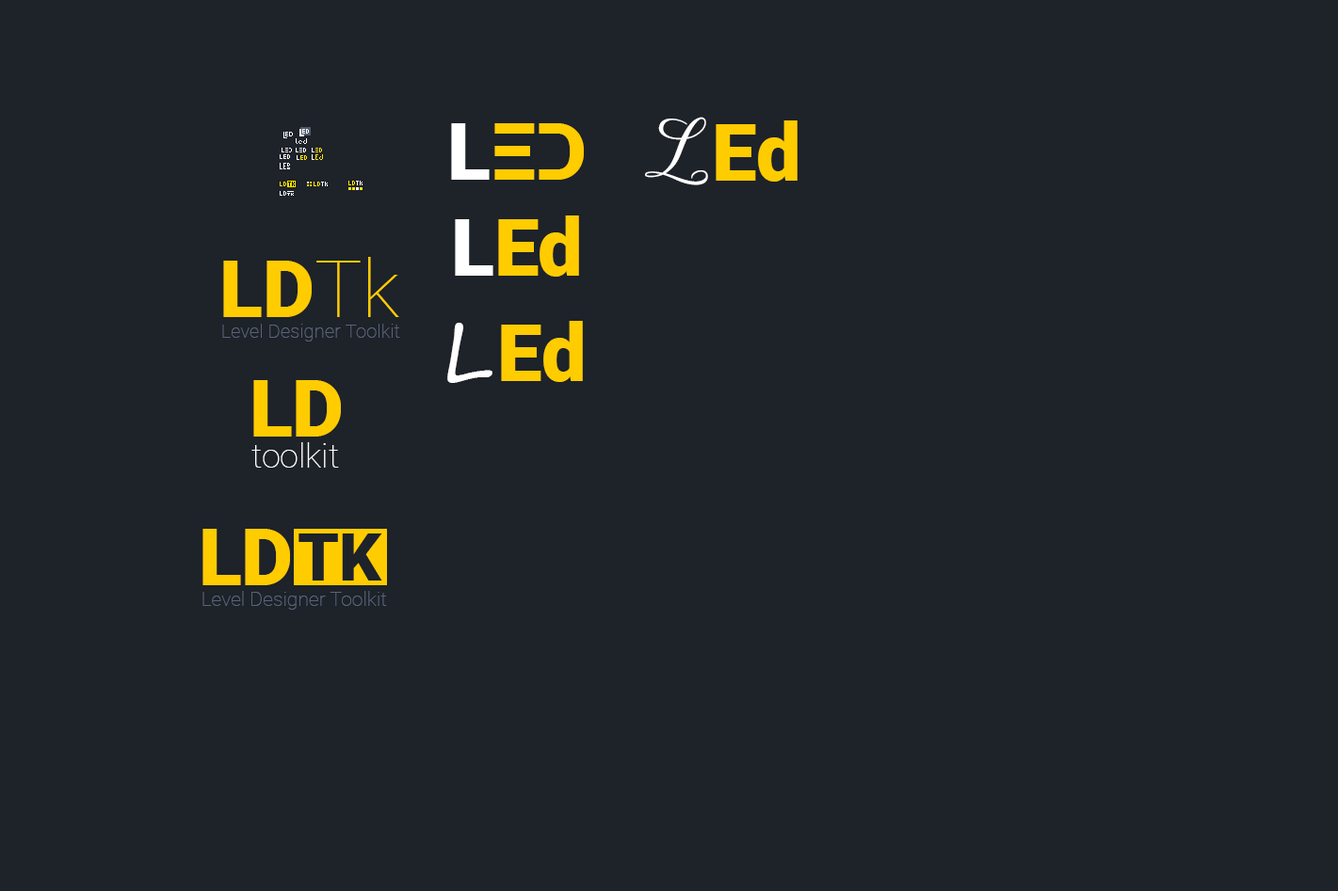
<style>
.page{position:relative;width:1338px;height:891px;background:#1e2229}
.page>*{position:absolute;margin:0}
.t1{font:79.6px "Roboto-Black";color:#ffcc00}
.t2{font:79.6px "Roboto-Black";color:#ffffff}
.t3{font:79.6px "Madina";color:#ffffff}
.t4{font:79.6px "Roboto-Thin";color:#ffcc00}
.t5{font:19.3px "Roboto-Thin";color:#596479}
.t6{font:79.6px "SegoeScript";color:#ffffff}
.t7{font:33.6px "Roboto-Thin";color:#ffffff}
.t8{font:66px "Roboto-Black";color:#1e2229}
.t9{font:20px "Roboto-Thin";color:#596479}
</style>
<div class="page">
<p class="t1" style="left:451px;top:123px;width:133px;height:57px"><span class="t2">L</span>ED</p>
<p class="t3" style="left:645px;top:117px;width:63px;height:68px">L</p>
<p class="t1" style="left:715px;top:120px;width:82px;height:62px">Ed</p>
<p class="t1" style="left:455px;top:216px;width:124px;height:61px"><span class="t2">L</span>Ed</p>
<p class="t1" style="left:223px;top:257px;width:176px;height:60px">LD<span class="t4">Tk</span></p>
<p class="t5" style="left:222px;top:324px;width:178px;height:18px">Level Designer Toolkit</p>
<p class="t6" style="left:447px;top:323px;width:45px;height:60px">L</p>
<p class="t1" style="left:501px;top:321px;width:82px;height:61px">Ed</p>
<p class="t1" style="left:253px;top:380px;width:88px;height:57px">LD</p>
<p class="t7" style="left:251px;top:442px;width:88px;height:26px">toolkit</p>
<p class="t1" style="left:202px;top:529px;width:88px;height:57px">LD</p>
<p class="t8" style="left:298px;top:534px;width:84px;height:47px">TK</p>
<p class="t9" style="left:202px;top:591px;width:185px;height:19px">Level Designer Toolkit</p>
</div>
